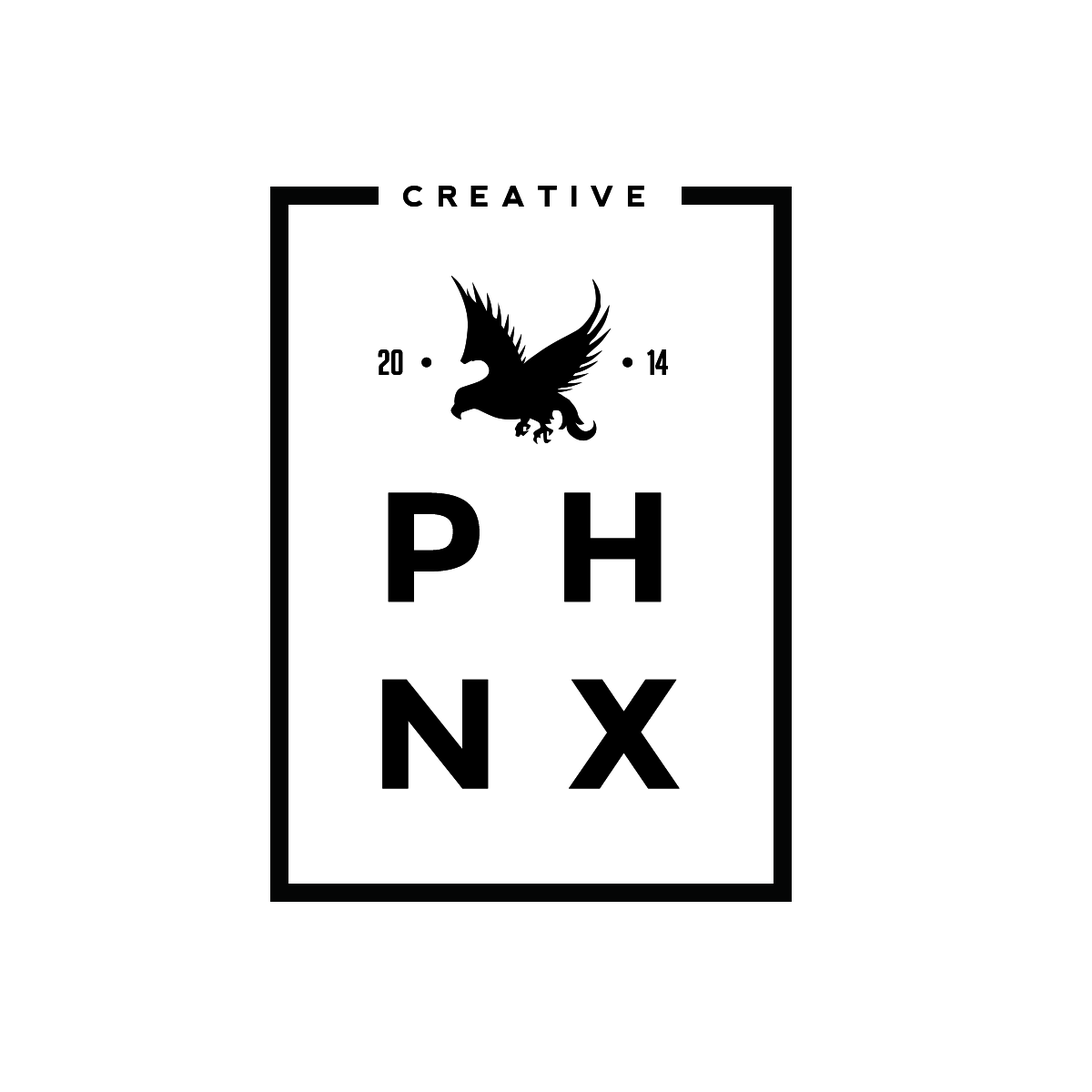
<style>
.page{position:relative;width:1092px;height:1092px;background:#ffffff}
.page>*{position:absolute;margin:0}
.t1{font:28.2px "nevis-Bold";letter-spacing:0.4em;color:#000000;text-transform:uppercase;scale:1.05 1}
.t2{font:34.9px "BigNoodleTitling";letter-spacing:-0.025em;color:#000000;text-transform:uppercase;scale:1.05 1}
.t3{font:155.5px "Montserrat-Bold";letter-spacing:0.4em;color:#000000;text-transform:uppercase;scale:1.05 1}
</style>
<div class="page">
<p class="t1" style="left:403px;top:186px;width:241px;height:21px">creative</p>
<p class="t2" style="left:378px;top:349px;width:25px;height:26px">20</p>
<p class="t2" style="left:647px;top:349px;width:21px;height:26px">14</p>
<p class="t3" style="left:382px;top:492px;width:298px;height:297px;text-align:center">ph<br>nx</p>
</div>
